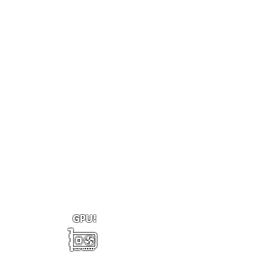
<style>
.page{position:relative;width:256px;height:256px;background:#ffffff}
.page>*{position:absolute;margin:0}
.t1{font:11px "Calibri-Bold";color:#ffffff}
</style>
<div class="page">
<p class="t1" style="left:73px;top:215px;width:23px;height:7px">GPU!</p>
</div>
